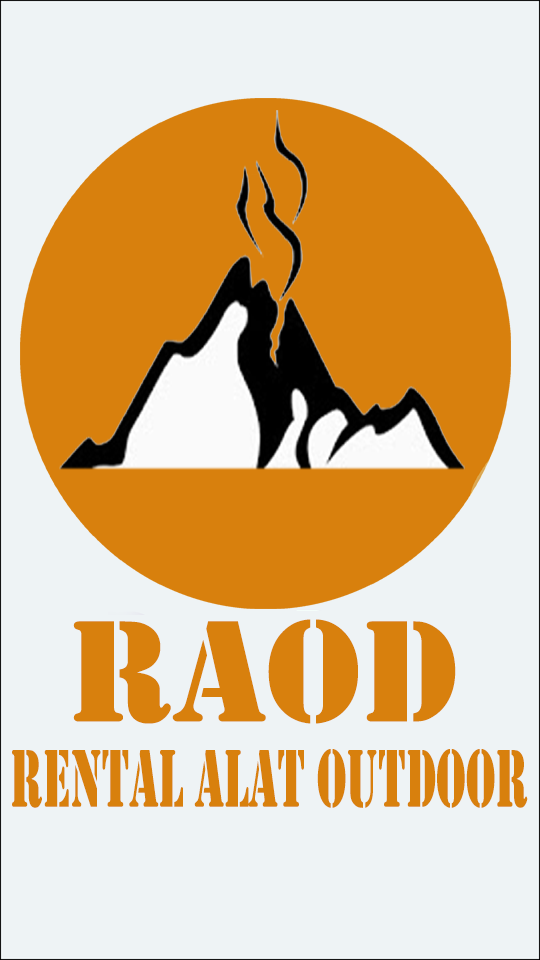
<style>
.page{position:relative;width:540px;height:960px;background:#eef3f5}
.page>*{position:absolute;margin:0}
.t1{font:150px "Stencil";color:#d8800d}
.t2{font:85px "Stencil";color:#d8800d;scale:0.55 1}
</style>
<div class="page">
<p class="t1" style="left:73px;top:619px;width:383px;height:105px">RAOD</p>
<p class="t2" style="left:12px;top:749px;width:516px;height:59px">rental alat outdoor</p>
</div>
